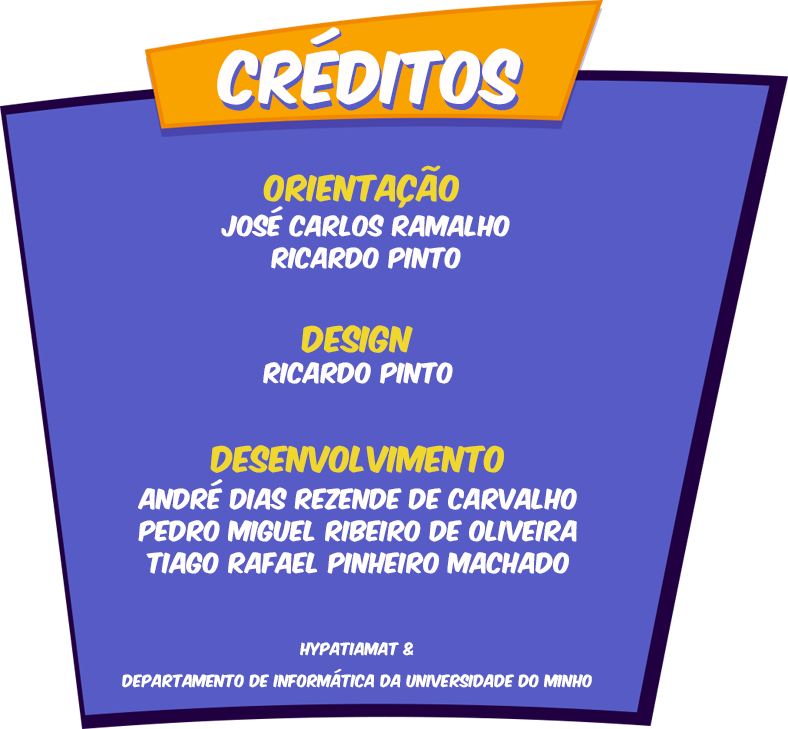
<style>
.page{position:relative;width:788px;height:729px;background:#575bc5}
.page>*{position:absolute;margin:0}
.t1{font:60.5px "KomikaAxis";color:#fffefd}
.t2{font:63.9px "KomikaAxis";scale:0.95 1}
.t3{font:30.4px "KomikaAxis";color:#f0d72d}
.t4{font:23.8px/31.7px "KomikaAxis";color:#fefdfb}
.t5{font:23.8px "KomikaAxis";color:#fffefd}
.t6{font:23.8px/31.7px "KomikaAxis";color:#fffefd}
.t7{font:14.5px/31.9px "KomikaAxis";color:#fffffe}
</style>
<div class="page">
<p class="t1" style="left:217px;top:27px;width:304px;height:78px">Créditos</p>
<p class="t2" style="left:220px;top:29px;width:304px;height:82px">Créditos</p>
<p class="t3" style="left:263px;top:165px;width:196px;height:43px">Orientação</p>
<p class="t4" style="left:221px;top:206px;width:289px;height:63px;text-align:center">José carlos ramalho<br>ricardo pinto</p>
<p class="t3" style="left:301px;top:325px;width:112px;height:28px">dESIGN</p>
<p class="t5" style="left:263px;top:362px;width:190px;height:22px">rICARDO pINTO</p>
<p class="t3" style="left:210px;top:445px;width:294px;height:28px">dESENVOLVIMENTO</p>
<p class="t6" style="left:138px;top:479px;width:439px;height:95px;text-align:center">André Dias Rezende de Carvalho<br>Pedro Miguel Ribeiro de Oliveira<br>Tiago Rafael Pinheiro Machado</p>
<p class="t7" style="left:122px;top:642px;width:470px;height:46px;text-align:center">Hypatiamat &amp; <br>dEPARTAMENTO DE iNFORMÁTICA DA UNIVERSIDADE DO MINHO</p>
</div>
